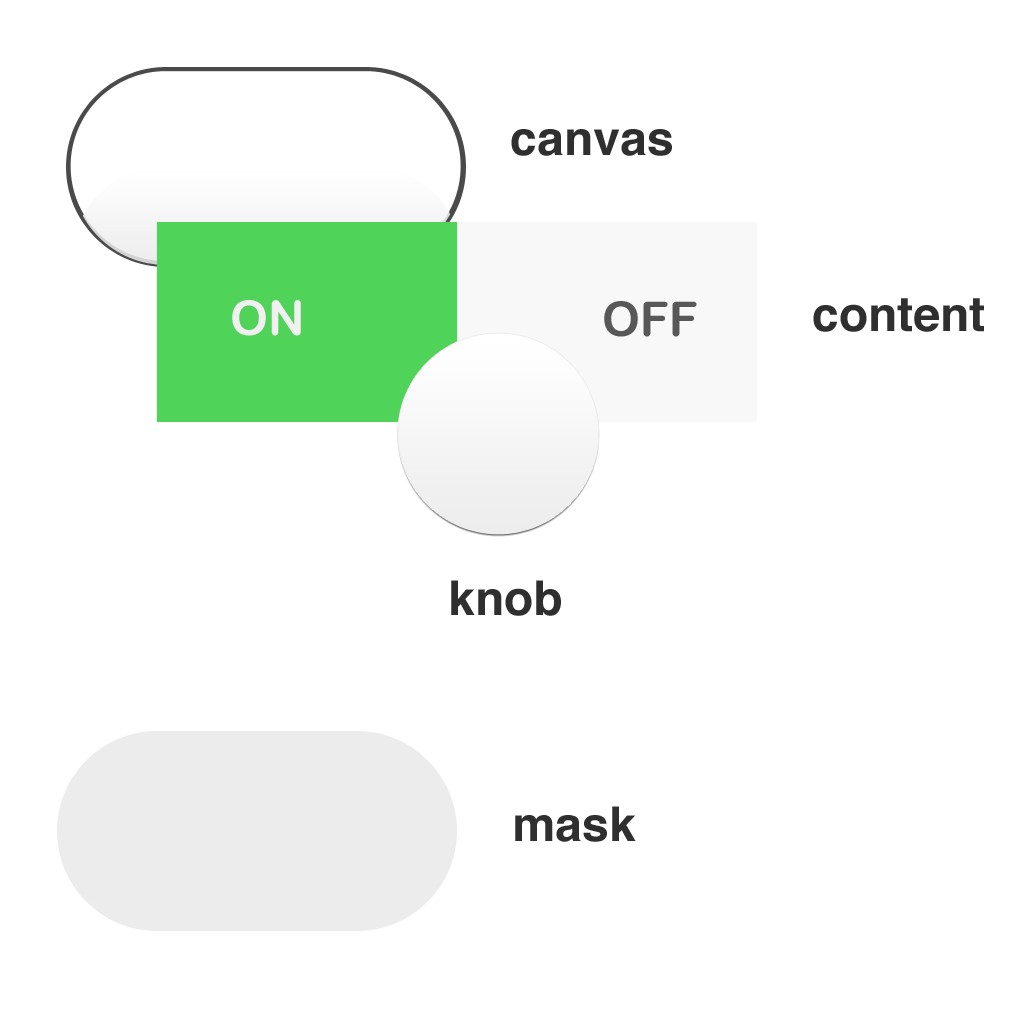
<style>
.page{position:relative;width:1024px;height:1024px;background:#ffffff}
.page>*{position:absolute;margin:0}
.t1{font:48px "Helvetica-Bold";color:#2f2f2f}
.t2{font:48px "ArialRoundedMTBold";color:#f0f0f0}
.t3{font:48px "ArialRoundedMTBold";color:#595858}
</style>
<div class="page">
<p class="t1" style="left:511px;top:129px;width:161px;height:27px">canvas</p>
<p class="t2" style="left:232px;top:300px;width:69px;height:36px">ON</p>
<p class="t3" style="left:604px;top:301px;width:93px;height:36px">OFF</p>
<p class="t1" style="left:813px;top:298px;width:171px;height:34px">content</p>
<p class="t1" style="left:451px;top:580px;width:110px;height:36px">knob</p>
<p class="t1" style="left:515px;top:806px;width:121px;height:36px">mask</p>
</div>
